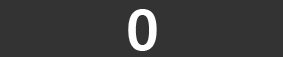
<style>
.page{position:relative;width:283px;height:57px;background:#333333}
.page>*{position:absolute;margin:0}
.t1{font:58.3px "PTSans-Bold";color:#fefefe}
</style>
<div class="page">
<p class="t1" style="left:128px;top:9px;width:29px;height:42px">0</p>
</div>
